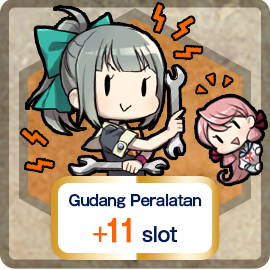
<style>
.page{position:relative;width:270px;height:270px}
.page>*{position:absolute;margin:0}
.t1{font:15px "GothicMB101Pro-Medium";letter-spacing:-0.04em;color:#001d59;font-weight:bold;scale:0.9 1}
.t2{font:20px "GothicMB101Pro-Medium";letter-spacing:-0.04em;color:#ff6000;font-weight:bold;scale:0.9 1}
.t3{font:30px "GothicMB101Pro-Medium";letter-spacing:-0.04em;color:#ff6000;font-weight:bold;scale:0.9 1}
.t4{font:20px "GothicMB101Pro-Medium";letter-spacing:-0.04em;color:#001d59;font-weight:bold;scale:0.9 1}
</style>
<div class="page">
<p class="t1" style="left:69px;top:194px;width:133px;height:49px;text-align:center">Gudang Peralatan<br><span class="t2">+</span><span class="t3">11 </span><span class="t4">slot</span></p>
</div>
